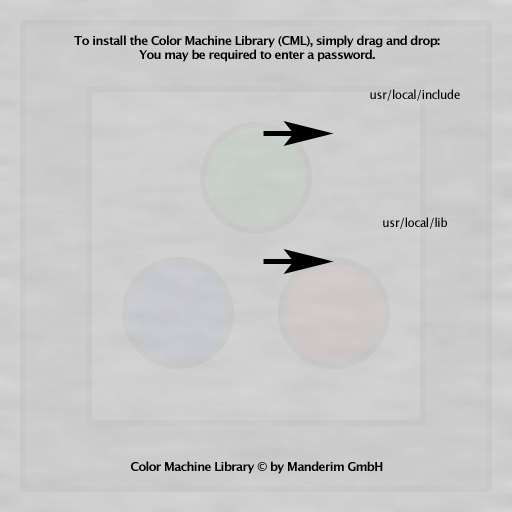
<style>
.page{position:relative;width:512px;height:512px;background:#cecece}
.page>*{position:absolute;margin:0}
.t1{font:12px "LucidaGrande-Bold";letter-spacing:-0.05em;color:#000000}
.t2{font:12px/128px "LucidaGrande";letter-spacing:-0.05em;color:#000000}
</style>
<div class="page">
<p class="t1" style="left:74px;top:35px;width:366px;height:27px;text-align:center">To install the Color Machine Library (CML), simply drag and drop:<br>You may be required to enter a password.</p>
<p class="t2" style="left:370px;top:89px;width:90px;height:140px;text-align:center">usr/local/include<br>usr/local/lib</p>
<p class="t1" style="left:131px;top:461px;width:252px;height:13px">Color Machine Library © by Manderim GmbH</p>
</div>
